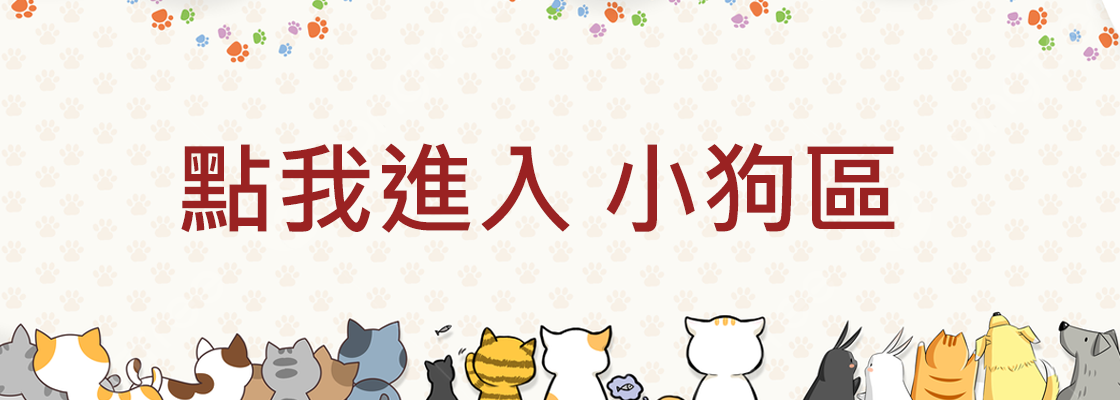
<style>
.page{position:relative;width:1120px;height:400px;background:#fbfaf5}
.page>*{position:absolute;margin:0}
.t1{font:100px "MicrosoftJhengHeiBold";color:#9a2222}
</style>
<div class="page">
<p class="t1" style="left:181px;top:143px;width:714px;height:90px">點我進入 小狗區</p>
</div>
